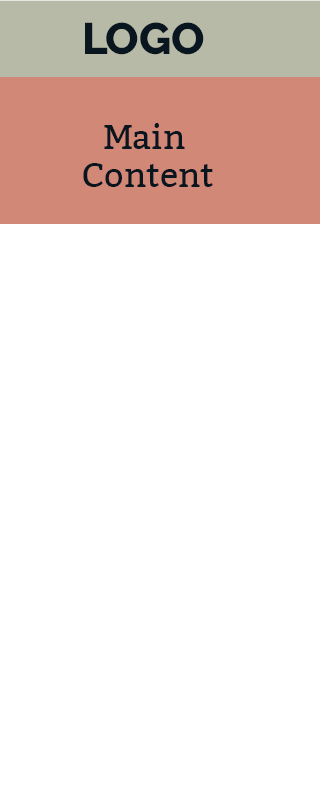
<style>
.page{position:relative;width:320px;height:800px;background:#ffffff}
.page>*{position:absolute;margin:0}
.t1{font:44px "Raleway-ExtraBold";color:#09161f}
.t2{font:34px/38px "Bitter-Regular";color:#09161f}
</style>
<div class="page">
<p class="t1" style="left:85px;top:22px;width:119px;height:33px">LOGO</p>
<p class="t2" style="left:83px;top:123px;width:130px;height:64px;text-align:center">Main<br> Content</p>
</div>
